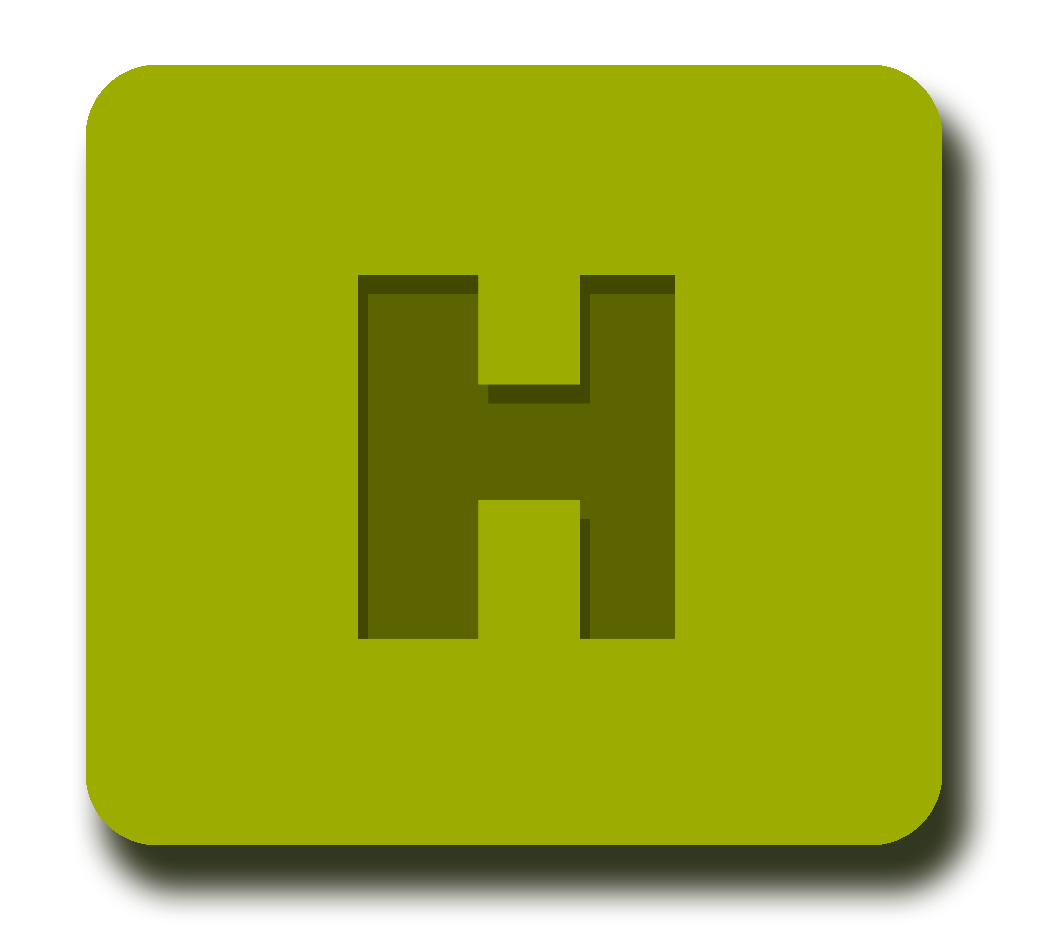
<style>
.page{position:relative;width:1053px;height:930px;background:#9cac00}
.page>*{position:absolute;margin:0}
.t1{font:504.7px "BadTyp-Regular";color:#5b6400}
</style>
<div class="page">
<p class="t1" style="left:358px;top:275px;width:317px;height:364px">H</p>
</div>
